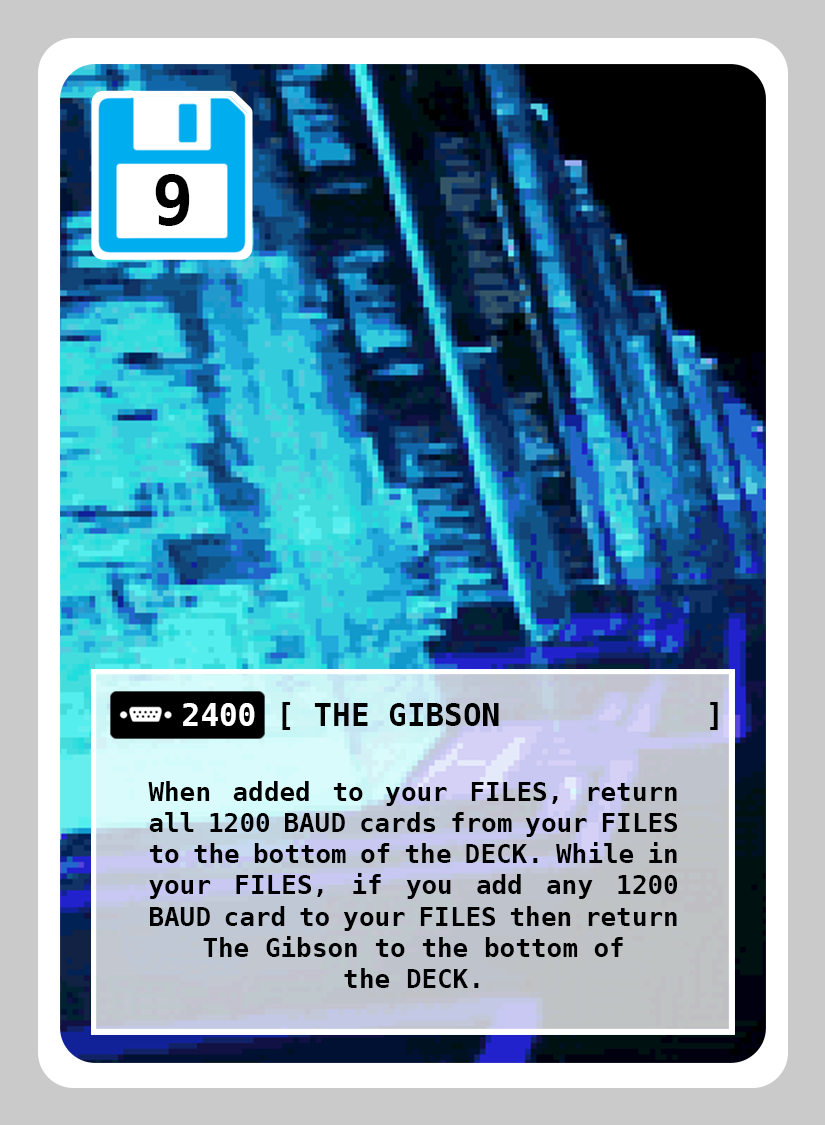
<style>
.page{position:relative;width:825px;height:1125px}
.page>*{position:absolute;margin:0}
.t1{font:69px "DejaVuSansMono-Bold";color:#000000}
.t2{font:31px "DejaVuSansMono-Bold";color:#ffffff}
.t3{font:31px "DejaVuSansMono-Bold";color:#000000}
.t4{font:26px "DejaVuSansMono-Bold";color:#000000}
</style>
<div class="page">
<p class="t1" style="left:155px;top:174px;width:35px;height:52px">9</p>
<p class="t2" style="left:183px;top:703px;width:72px;height:23px">2400</p>
<p class="t3" style="left:314px;top:703px;width:185px;height:23px">THE GIBSON</p>
<p class="t4" style="left:148px;top:781px;width:529px;height:207px;text-align:justify">When added to your FILES, return all 1200 BAUD cards from your FILES to the bottom of the DECK. While in your FILES, if you add any 1200 BAUD card to your FILES then return The Gibson to the bottom of<br>the DECK.</p>
</div>
